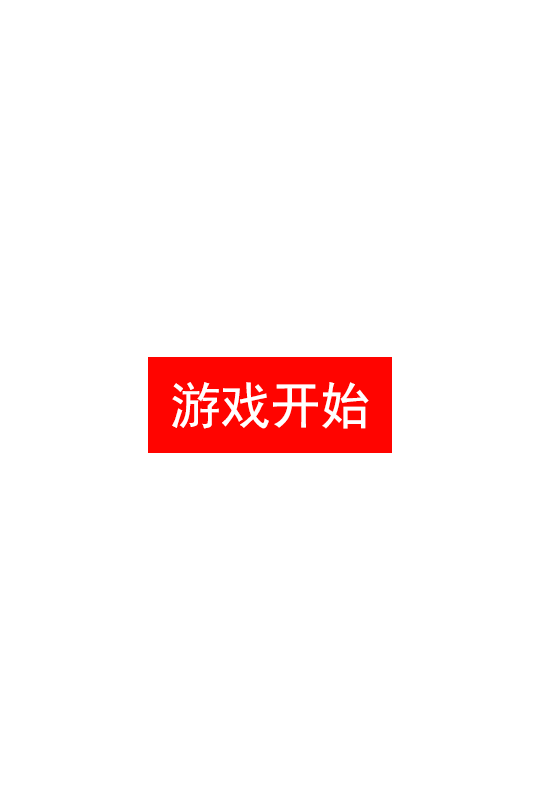
<style>
.page{position:relative;width:540px;height:810px;background:#ffffff}
.page>*{position:absolute;margin:0}
.t1{font:50px "SimHei";color:#ffffff}
</style>
<div class="page">
<p class="t1" style="left:172px;top:382px;width:197px;height:47px">游戏开始</p>
</div>
